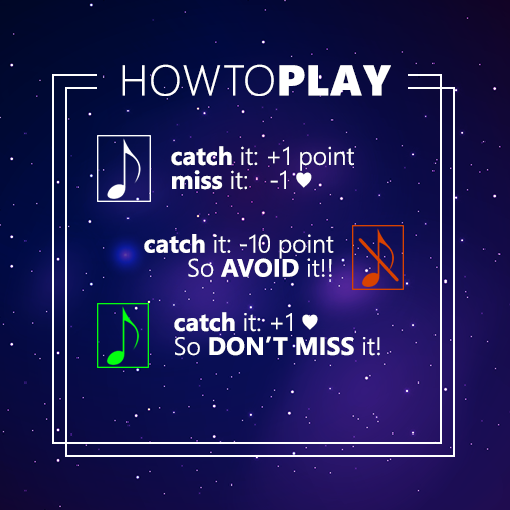
<style>
.page{position:relative;width:510px;height:510px}
.page>*{position:absolute;margin:0}
.t1{font:43px "SegoeUI-Light";letter-spacing:0.02em;color:#ffffff}
.t2{font:43px "SegoeUIBlack";letter-spacing:0.02em;color:#ffffff}
.t3{font:25px/24px "SegoeUI-Semilight";color:#ffffff}
.t4{font:25px/24px "SegoeUI-Bold";color:#ffffff}
</style>
<div class="page">
<p class="t1" style="left:122px;top:64px;width:269px;height:32px">HOWTO<span class="t2">PLAY</span></p>
<p class="t3" style="left:171px;top:146px;width:183px;height:44px"><span class="t4">catch</span> it: +1 point<br><span class="t4">miss </span>it:   -1 ♥</p>
<p class="t3" style="left:144px;top:234px;width:190px;height:43px;text-align:right"><span class="t4">catch</span> it: -10 point<br>So <span class="t4">AVOID</span> it!!</p>
<p class="t3" style="left:174px;top:312px;width:206px;height:44px"><span class="t4">catch</span> it: +1 ♥<br>So <span class="t4">DON’T MISS</span> it!</p>
</div>
